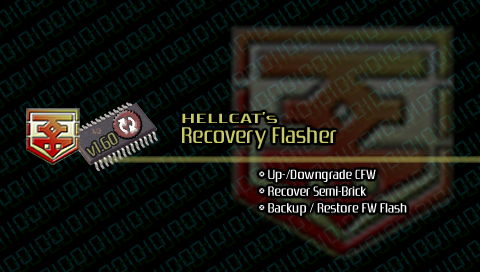
<style>
.page{position:relative;width:480px;height:272px;background:#000000}
.page>*{position:absolute;margin:0}
.t1{font:14px "Zrnic";color:#c8c864;scale:2 1}
.t2{font:18px "Zrnic";color:#98975e}
.t3{font:24px "Zrnic";color:#c8c864}
.t4{font:14px "Zrnic";color:#ffffff}
</style>
<div class="page">
<p class="t1" style="left:182px;top:112px;width:95px;height:11px">HELLCAT’s</p>
<p class="t2" style="left:86px;top:132px;width:32px;height:25px;rotate:-29deg">v1.60</p>
<p class="t3" style="left:182px;top:127px;width:155px;height:22px">Recovery Flasher</p>
<p class="t4" style="left:259px;top:169px;width:148px;height:47px">* Up-/Downgrade CFW<br>* Recover Semi-Brick<br>* Backup / Restore FW Flash</p>
</div>
